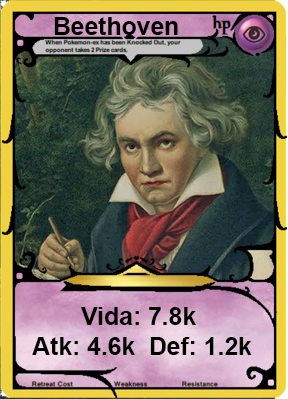
<style>
.page{position:relative;width:288px;height:399px}
.page>*{position:absolute;margin:0}
.t1{font:24.7px "Arial-BoldMT";color:#000000}
</style>
<div class="page">
<p class="t1" style="left:54px;top:17px;width:124px;height:18px">Beethoven</p>
<p class="t1" style="left:32px;top:307px;width:220px;height:48px;text-align:center">Vida: 7.8k <br>Atk: 4.6k  Def: 1.2k</p>
</div>
